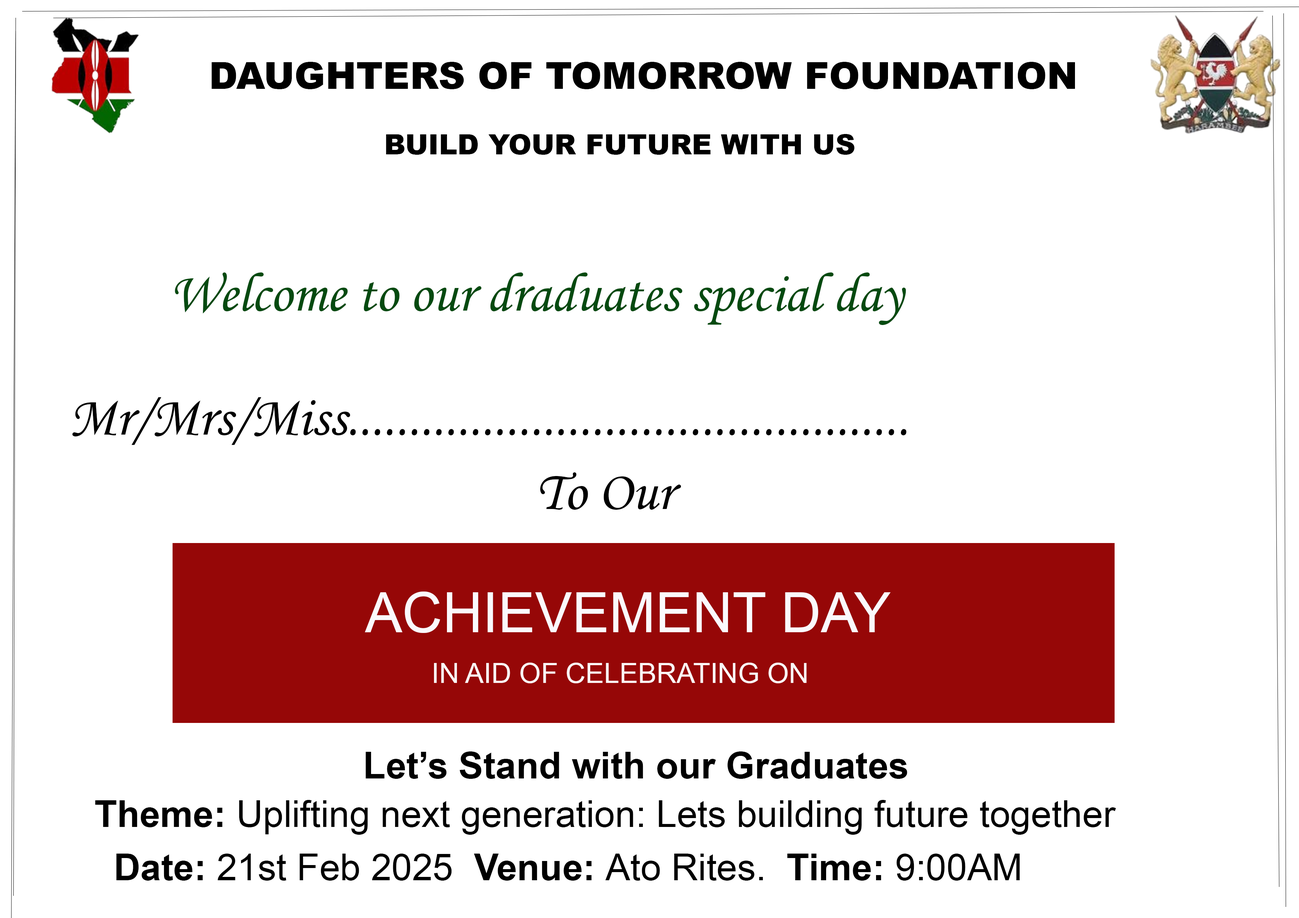
<style>
.page{position:relative;width:1299px;height:918px;background:#ffffff}
.page>*{position:absolute;margin:0}
.t1{font:37px "Arial-Black";color:#000000}
.t2{font:27.8px "Arial-Black";color:#000000}
.t3{font:55.5px "MonotypeCorsiva";color:#044a10}
.t4{font:55.5px "MonotypeCorsiva";color:#000000}
.t5{font:55.5px "ArialMT";color:#faf9fd}
.t6{font:27.8px "ArialMT";color:#fbf7f7}
.t7{font:37px "Arial-BoldMT";color:#000000}
.t8{font:37px "ArialMT";color:#000000}
</style>
<div class="page">
<p class="t1" style="left:211px;top:62px;width:864px;height:27px">DAUGHTERS OF TOMORROW FOUNDATION</p>
<p class="t2" style="left:386px;top:134px;width:468px;height:21px">BUILD YOUR FUTURE WITH US</p>
<p class="t3" style="left:175px;top:272px;width:731px;height:53px">Welcome to our draduates special day</p>
<p class="t4" style="left:72px;top:397px;width:834px;height:48px">Mr/Mrs/Miss..............................................</p>
<p class="t4" style="left:540px;top:472px;width:141px;height:38px">To Our</p>
<p class="t5" style="left:365px;top:592px;width:525px;height:41px">ACHIEVEMENT DAY</p>
<p class="t6" style="left:434px;top:663px;width:372px;height:20px">IN AID OF CELEBRATING ON</p>
<p class="t7" style="left:365px;top:752px;width:542px;height:27px">Let’s Stand with our Graduates</p>
<p class="t8" style="left:95px;top:800px;width:1021px;height:35px"><span class="t7">Theme:</span> Uplifting next generation: Lets building future together</p>
<p class="t8" style="left:116px;top:854px;width:904px;height:27px"><span class="t7">Date: </span>21st Feb 2025  <span class="t7">Venue: </span>Ato Rites. <span class="t7"> Time: </span>9:00AM</p>
</div>
